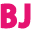
<style>
.page{position:relative;width:32px;height:32px;background:#e61371}
.page>*{position:absolute;margin:0}
.t1{font:48.3px "was@peenang";color:#e61371}
</style>
<div class="page">
<p class="t1" style="left:0px;top:3px;width:31px;height:26px">BJ</p>
</div>
